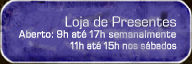
<style>
.page{position:relative;width:192px;height:64px}
.page>*{position:absolute;margin:0}
.t1{font:14.4px "EurostileNextLTPro-Regular";color:#ffffff}
.t2{font:10.7px "EurostileNextLTPro-Regular";font-weight:bold;scale:0.95 1}
.t3{font:10.7px "EurostileNextLTPro-Regular";font-weight:bold;scale:0.9 1}
</style>
<div class="page">
<p class="t1" style="left:65px;top:16px;width:111px;height:13px">Loja de Presentes</p>
<p class="t2" style="left:18px;top:30px;width:158px;height:8px">Aberto: 9h até 17h semanalmente</p>
<p class="t3" style="left:70px;top:41px;width:107px;height:9px">11h até 15h nos sábados</p>
</div>
